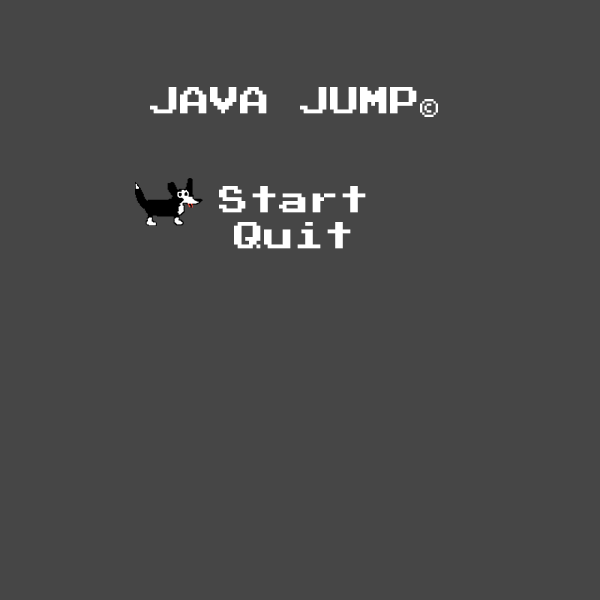
<style>
.page{position:relative;width:600px;height:600px;background:#464646}
.page>*{position:absolute;margin:0}
.t1{font:30px "PressStart2P";color:#ffffff}
.t2{font:18px "PressStart2P";color:#ffffff}
</style>
<div class="page">
<p class="t1" style="left:150px;top:87px;width:288px;height:30px">JAVA JUMP<span class="t2">©</span></p>
<p class="t1" style="left:219px;top:186px;width:147px;height:63px;text-align:center">Start<br>Quit</p>
</div>
